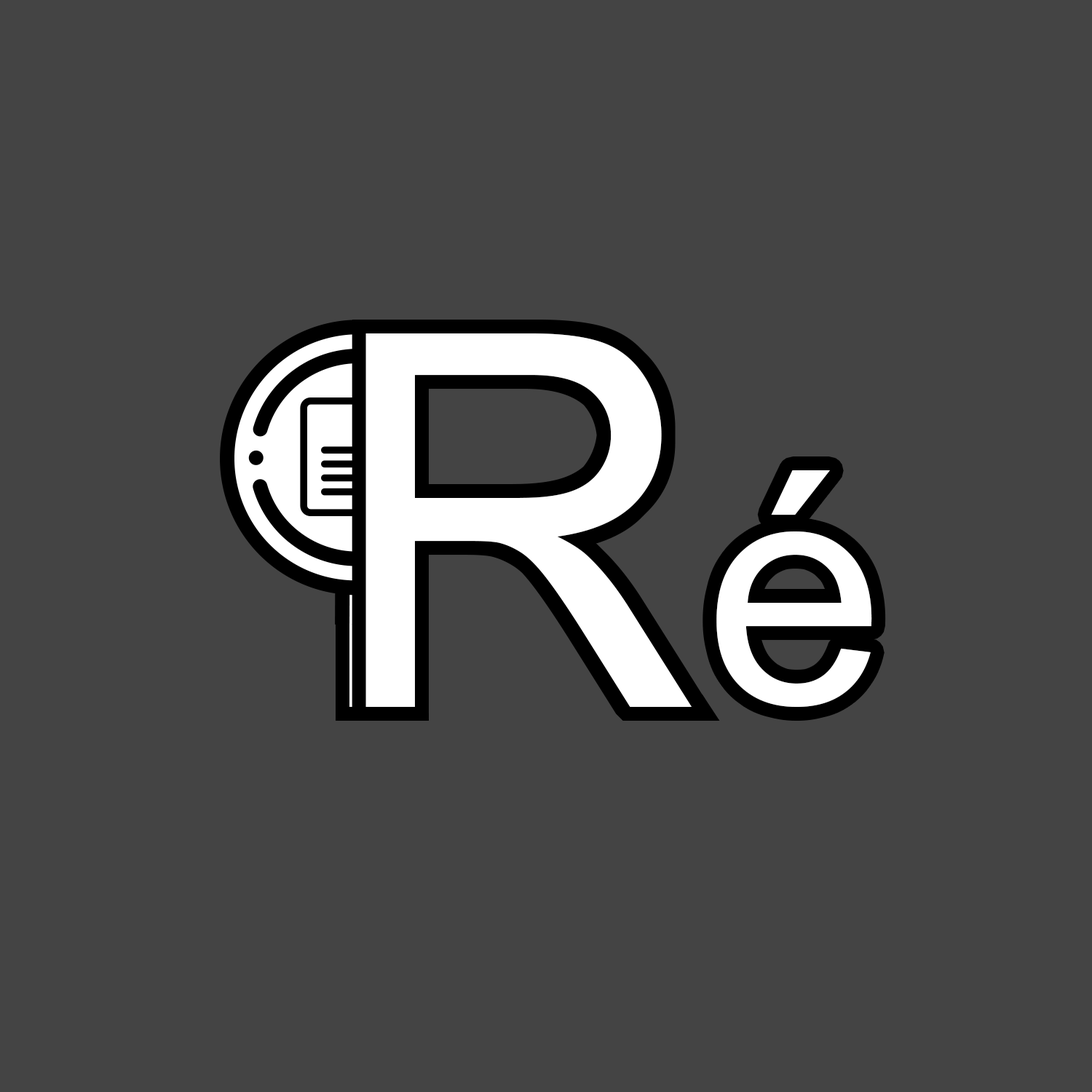
<style>
.page{position:relative;width:1092px;height:1092px;background:#444444}
.page>*{position:absolute;margin:0}
.t1{font:521.4px "ArialMT";letter-spacing:0.02em;color:#ffffff}
.t2{font:323.7px "ArialMT";letter-spacing:0.02em;color:#ffffff}
</style>
<div class="page">
<p class="t1" style="left:365px;top:333px;width:327px;height:374px">R</p>
<p class="t2" style="left:716px;top:470px;width:156px;height:237px">é</p>
</div>
